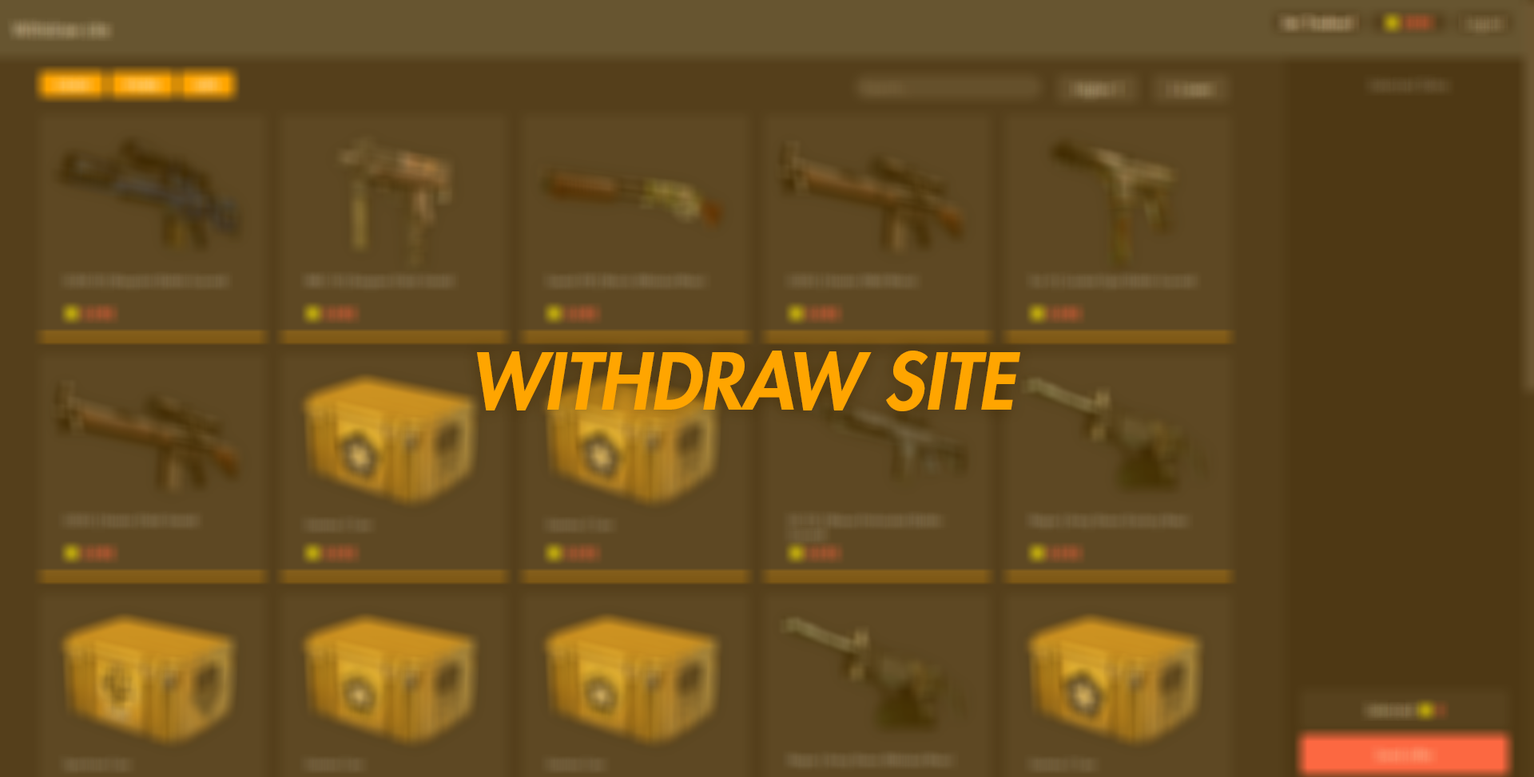
<style>
.page{position:relative;width:1534px;height:777px;background:#5e4823}
.page>*{position:absolute;margin:0}
.t1{font:76.7px "FuturaStd-HeavyOblique";color:#ffa500}
</style>
<div class="page">
<p class="t1" style="left:477px;top:351px;width:543px;height:60px">WITHDRAW SITE</p>
</div>
